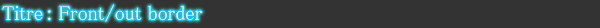
<style>
.page{position:relative;width:600px;height:28px;background:#333333}
.page>*{position:absolute;margin:0}
.t1{font:20px "MS-PMincho";color:#ffffff}
</style>
<div class="page">
<p class="t1" style="left:2px;top:4px;width:200px;height:18px">Titre : Front/out border</p>
</div>
